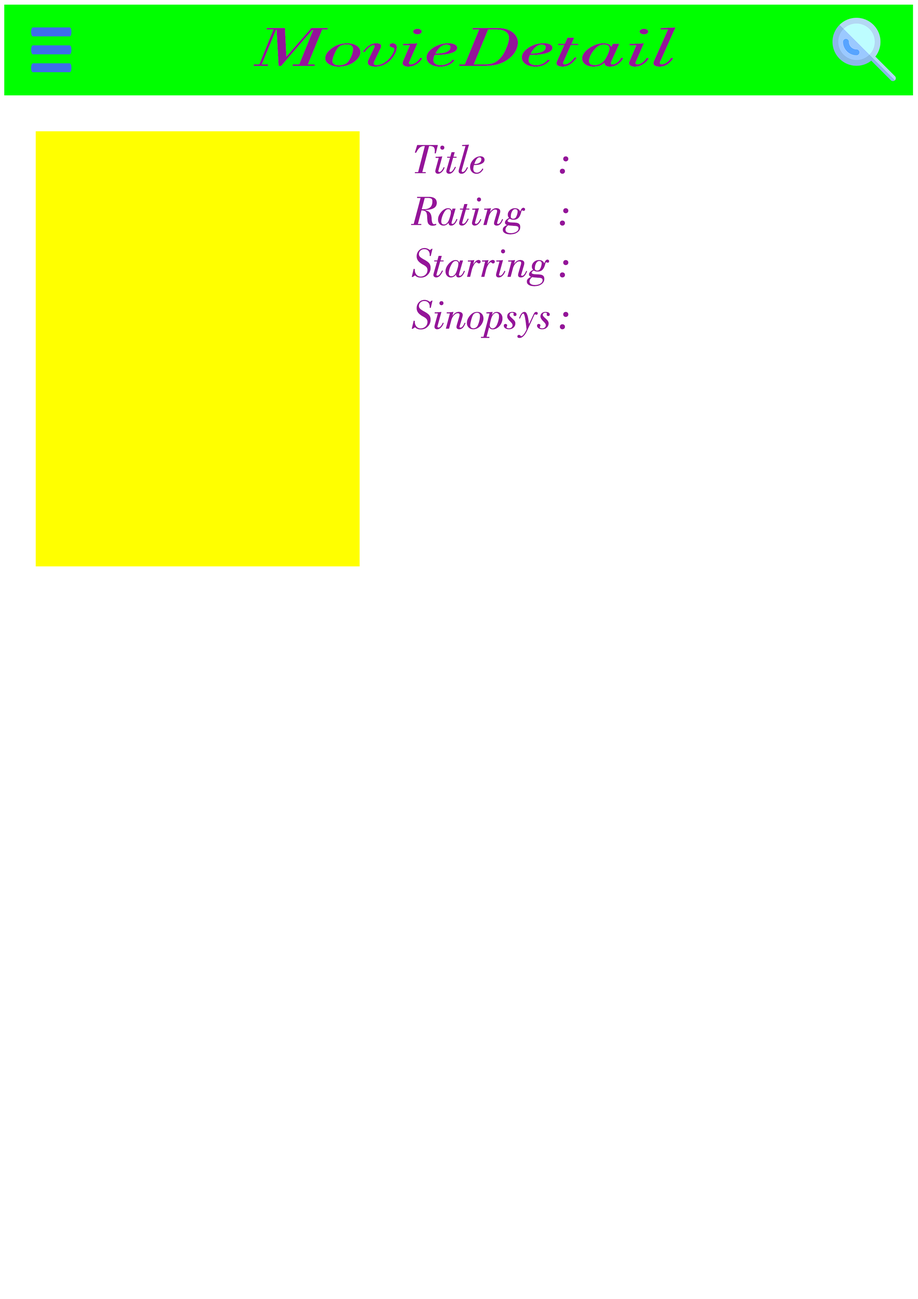
<style>
.page{position:relative;width:918px;height:1299px;background:#ffffff}
.page>*{position:absolute;margin:0}
.t1{font:58px "BodoniBT-BookItalic";color:#941499;scale:1.58 1}
.t2{font:43.2px "BodoniBT-BookItalic";color:#941499}
</style>
<div class="page">
<p class="t1" style="left:254px;top:27px;width:422px;height:40px">MovieDetail</p>
<p class="t2" style="left:411px;top:144px;width:158px;height:194px">Title      :<br>Rating   :<br>Starring :<br>Sinopsys :</p>
</div>
